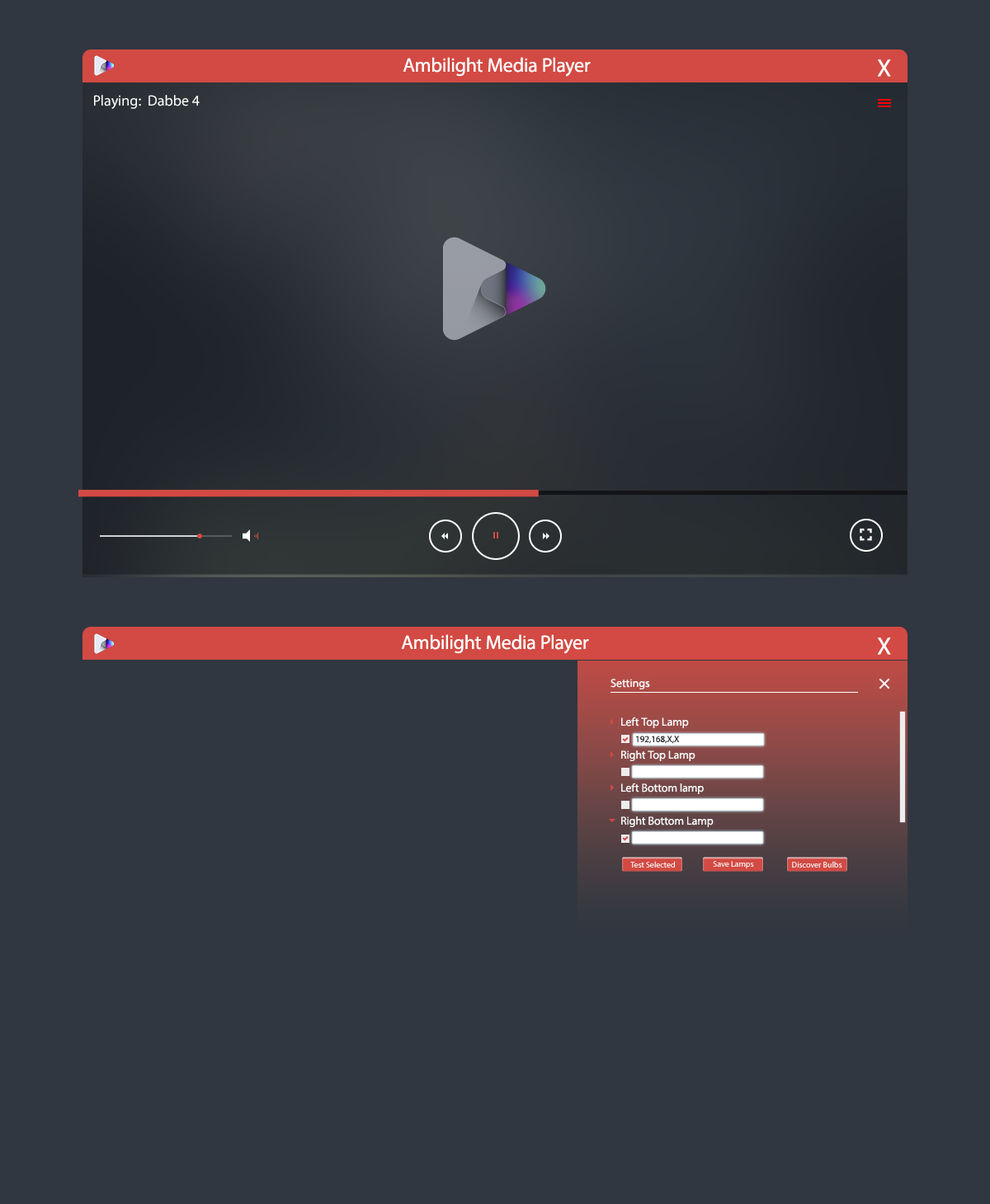
<style>
.page{position:relative;width:990px;height:1204px;background:#313740}
.page>*{position:absolute;margin:0}
.t1{font:19.8px "MyriadPro-Regular";color:#ffffff}
.t2{font:24.7px "MyriadPro-Regular";color:#ffffff}
.t3{font:14.8px "MyriadPro-Regular";color:#ffffff}
.t4{font:11.5px "MyriadPro-Regular";color:#f7f7f7}
.t5{font:9.1px "MyriadPro-Regular";color:#22262b}
.t6{font:8.2px "MyriadPro-Regular";color:#ffffff}
</style>
<div class="page">
<p class="t1" style="left:403px;top:57px;width:188px;height:20px">Ambilight Media Player</p>
<p class="t2" style="left:877px;top:59px;width:14px;height:18px">X</p>
<p class="t3" style="left:94px;top:95px;width:106px;height:14px">Playing:  Dabbe 4</p>
<p class="t1" style="left:401px;top:634px;width:188px;height:20px">Ambilight Media Player</p>
<p class="t2" style="left:877px;top:638px;width:14px;height:17px">X</p>
<p class="t4" style="left:610px;top:679px;width:40px;height:11px">Settings</p>
<p class="t4" style="left:621px;top:717px;width:68px;height:11px">Left Top Lamp</p>
<p class="t5" style="left:636px;top:736px;width:44px;height:8px">192,168,X,X</p>
<p class="t4" style="left:621px;top:751px;width:74px;height:10px">Right Top Lamp</p>
<p class="t4" style="left:621px;top:783px;width:83px;height:11px">Left Bottom lamp</p>
<p class="t4" style="left:621px;top:817px;width:93px;height:10px">Right Bottom Lamp</p>
<p class="t6" style="left:630px;top:861px;width:45px;height:7px">Test Selected</p>
<p class="t6" style="left:713px;top:861px;width:41px;height:8px">Save Lamps</p>
<p class="t6" style="left:792px;top:861px;width:50px;height:7px">Discover Bulbs</p>
</div>
